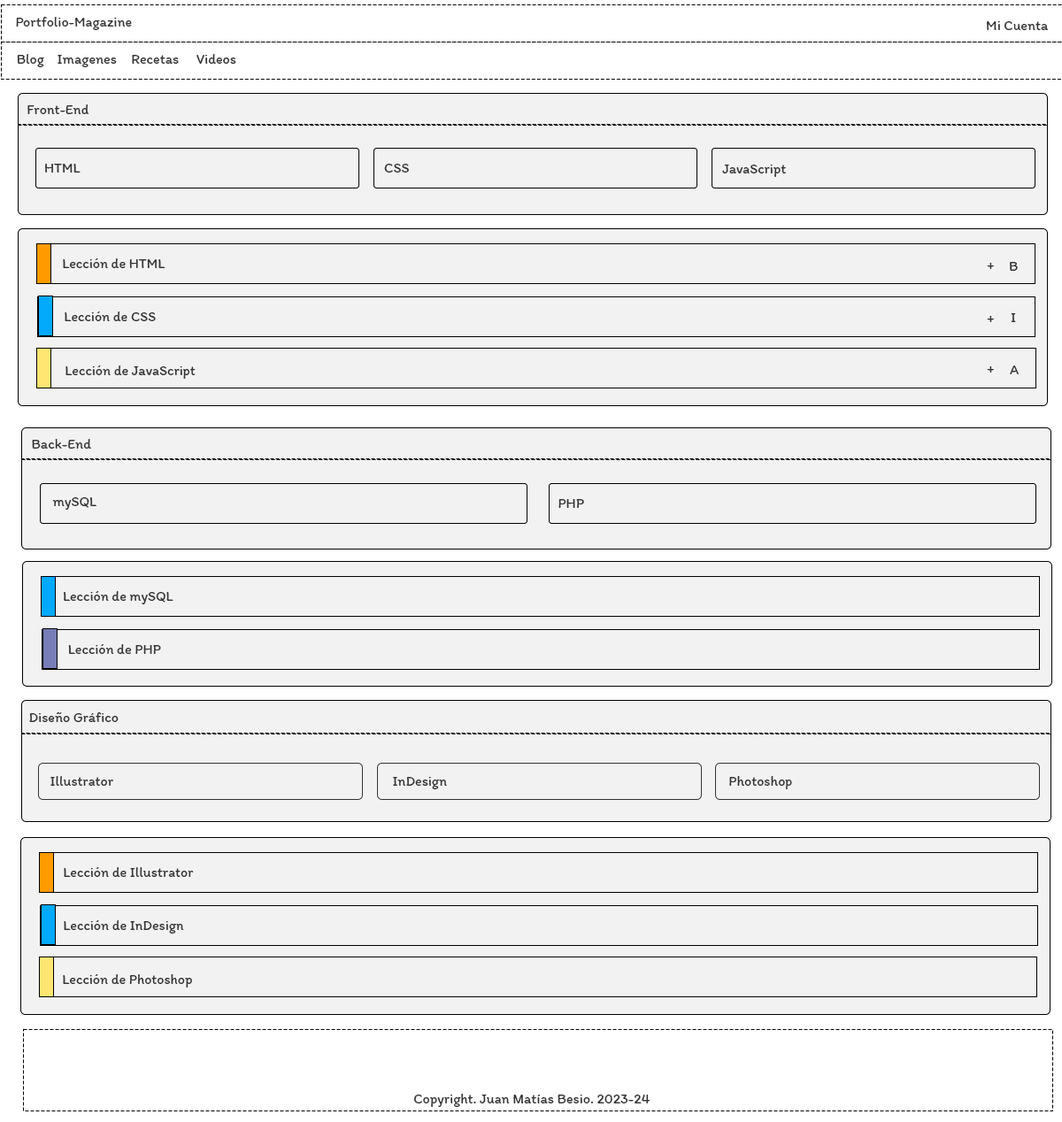
<style>
.page{position:relative;width:1062px;height:1122px;background:#f2f2f2}
.page>*{position:absolute;margin:0}
.t1{font:14.2px "Itim-Regular";color:#333333}
</style>
<div class="page">
<p class="t1" style="left:16px;top:17px;width:116px;height:13px">Portfolio-Magazine</p>
<p class="t1" style="left:987px;top:21px;width:62px;height:9px">Mi Cuenta</p>
<p class="t1" style="left:17px;top:54px;width:27px;height:13px">Blog</p>
<p class="t1" style="left:58px;top:55px;width:59px;height:12px">Imagenes</p>
<p class="t1" style="left:132px;top:55px;width:47px;height:9px">Recetas</p>
<p class="t1" style="left:197px;top:54px;width:39px;height:10px">Videos</p>
<p class="t1" style="left:27px;top:104px;width:62px;height:10px">Front-End</p>
<p class="t1" style="left:45px;top:164px;width:36px;height:9px">HTML</p>
<p class="t1" style="left:384px;top:164px;width:25px;height:9px">CSS</p>
<p class="t1" style="left:722px;top:165px;width:64px;height:12px">JavaScript</p>
<p class="t1" style="left:63px;top:258px;width:103px;height:10px">Lección de HTML</p>
<p class="t1" style="left:987px;top:263px;width:7px;height:6px">+</p>
<p class="t1" style="left:1010px;top:262px;width:8px;height:9px">B</p>
<p class="t1" style="left:65px;top:312px;width:91px;height:9px">Lección de CSS</p>
<p class="t1" style="left:987px;top:316px;width:7px;height:6px">+</p>
<p class="t1" style="left:1011px;top:313px;width:5px;height:9px">I</p>
<p class="t1" style="left:66px;top:366px;width:130px;height:13px">Lección de JavaScript</p>
<p class="t1" style="left:1010px;top:366px;width:9px;height:8px">A</p>
<p class="t1" style="left:987px;top:366px;width:7px;height:7px">+</p>
<p class="t1" style="left:32px;top:439px;width:59px;height:10px">Back-End</p>
<p class="t1" style="left:52px;top:498px;width:44px;height:12px">mySQL</p>
<p class="t1" style="left:559px;top:499px;width:25px;height:9px">PHP</p>
<p class="t1" style="left:64px;top:591px;width:110px;height:14px">Lección de mySQL</p>
<p class="t1" style="left:68px;top:644px;width:93px;height:10px">Lección de PHP</p>
<p class="t1" style="left:29px;top:713px;width:90px;height:9px">Diseño Gráfico</p>
<p class="t1" style="left:50px;top:776px;width:63px;height:10px">Illustrator</p>
<p class="t1" style="left:393px;top:777px;width:54px;height:13px">InDesign</p>
<p class="t1" style="left:729px;top:776px;width:63px;height:14px">Photoshop</p>
<p class="t1" style="left:64px;top:868px;width:130px;height:9px">Lección de Illustrator</p>
<p class="t1" style="left:64px;top:921px;width:120px;height:13px">Lección de InDesign</p>
<p class="t1" style="left:63px;top:975px;width:129px;height:13px">Lección de Photoshop</p>
<p class="t1" style="left:413px;top:1094px;width:237px;height:13px">Copyright. Juan Matías Besio. 2023-24</p>
</div>
